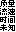
<style>
.page{position:relative;width:16px;height:32px;background:#fafafa}
.page>*{position:absolute;margin:0}
.t1{font:8px "ChillBitmap7x";color:#000000}
</style>
<div class="page">
<p class="t1" style="left:0px;top:0px;width:15px;height:7px">质量</p>
<p class="t1" style="left:0px;top:8px;width:15px;height:7px">流速</p>
<p class="t1" style="left:0px;top:16px;width:15px;height:7px">时间</p>
<p class="t1" style="left:0px;top:24px;width:15px;height:7px">未知</p>
</div>
